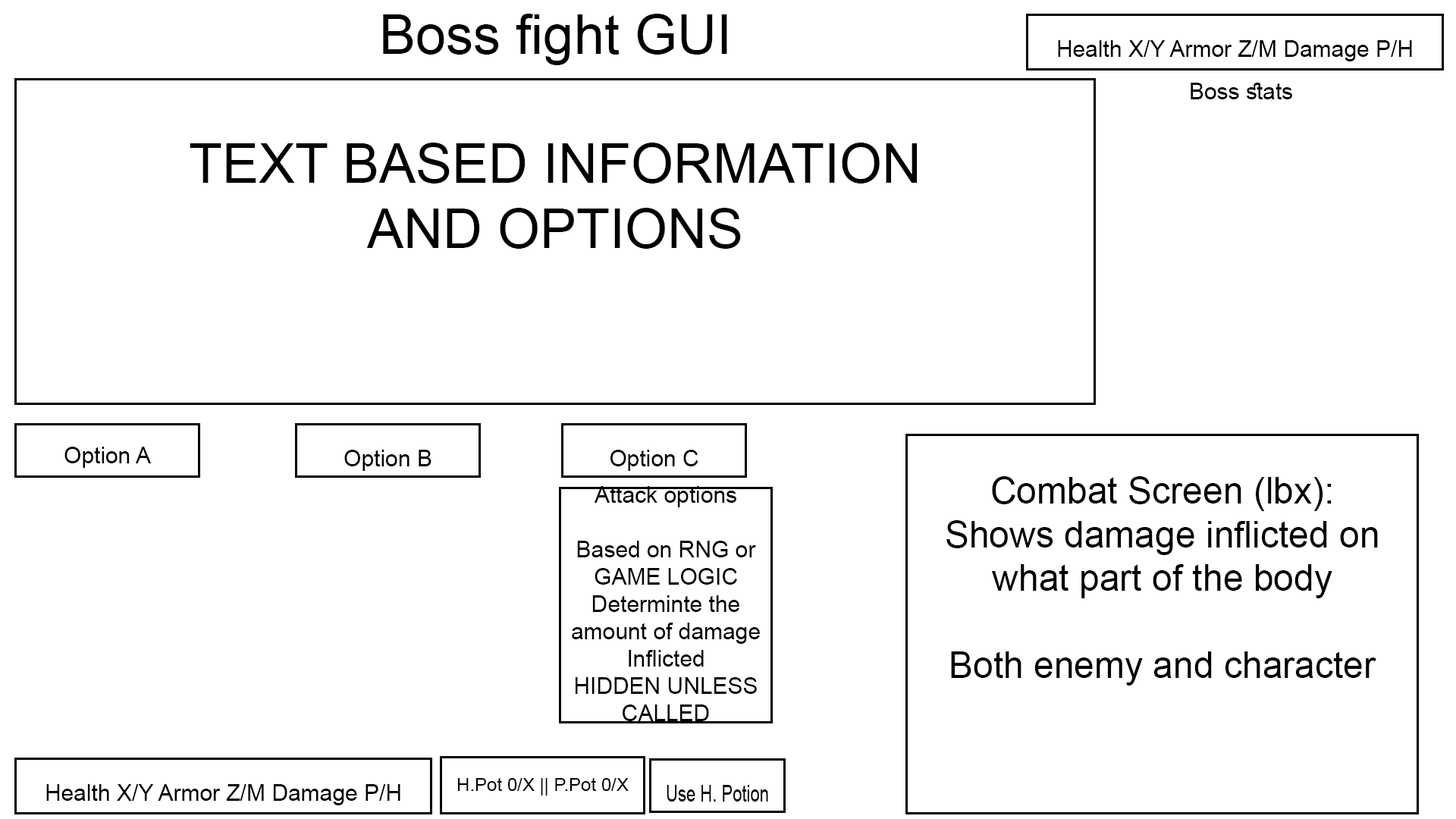
<style>
.page{position:relative;width:1456px;height:819px;background:#ffffff}
.page>*{position:absolute;margin:0}
.t1{font:54.6px "ArialMT";color:#000000}
.t2{font:22.7px "ArialMT";color:#000000}
.t3{font:22.8px "ArialMT";color:#000000}
.t4{font:18.2px "ArialMT";color:#000000}
.t5{font:36.4px "ArialMT";color:#000000}
.t6{font:22.7px "ArialMT";color:#000000;scale:0.73 1}
</style>
<div class="page">
<p class="t1" style="left:383px;top:14px;width:344px;height:51px">Boss fight GUI</p>
<p class="t2" style="left:1058px;top:40px;width:354px;height:21px">Health X/Y Armor Z/M Damage P/H</p>
<p class="t2" style="left:1191px;top:83px;width:101px;height:16px">Boss stats</p>
<p class="t1" style="left:190px;top:143px;width:728px;height:106px;text-align:center">TEXT BASED INFORMATION<br>AND OPTIONS</p>
<p class="t3" style="left:64px;top:447px;width:88px;height:21px"><span class="t4"><br></span>Option A</p>
<p class="t3" style="left:344px;top:450px;width:87px;height:21px">Option B</p>
<p class="t3" style="left:610px;top:450px;width:88px;height:21px">Option C</p>
<p class="t5" style="left:946px;top:476px;width:432px;height:210px;text-align:center">Combat Screen (lbx):<br>Shows damage inflicted on what part of the body <br><br>Both enemy and character</p>
<p class="t2" style="left:572px;top:486px;width:188px;height:235px;text-align:center">Attack options<br><br>Based on RNG or<br>GAME LOGIC<br>Determinte the amount of damage<br>Inflicted<br>HIDDEN UNLESS<br>CALLED</p>
<p class="t2" style="left:46px;top:784px;width:354px;height:21px">Health X/Y Armor Z/M Damage P/H</p>
<p class="t4" style="left:457px;top:777px;width:172px;height:18px">H.Pot 0/X || P.Pot 0/X</p>
<p class="t6" style="left:667px;top:785px;width:101px;height:17px">Use H. Potion</p>
</div>
